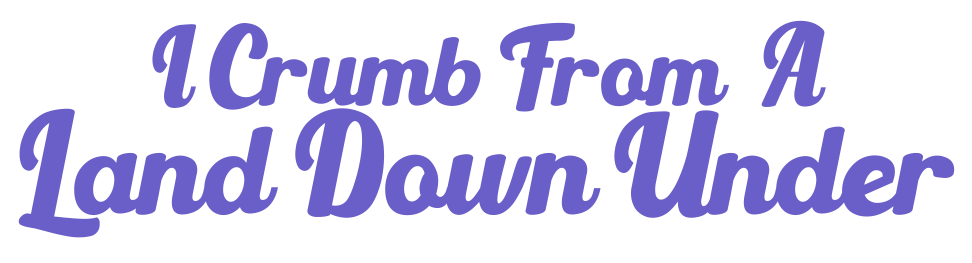
<style>
.page{position:relative;width:972px;height:263px;background:#ffffff}
.page>*{position:absolute;margin:0}
.t1{font:117.7px "LightBeachRegular";color:#6a5fc8}
.t2{font:150px "LightBeachRegular";color:#6a5fc8}
</style>
<div class="page">
<p class="t1" style="left:152px;top:20px;width:674px;height:92px">I Crumb From  A</p>
<p class="t2" style="left:18px;top:108px;width:937px;height:130px">Land Down Under</p>
</div>
